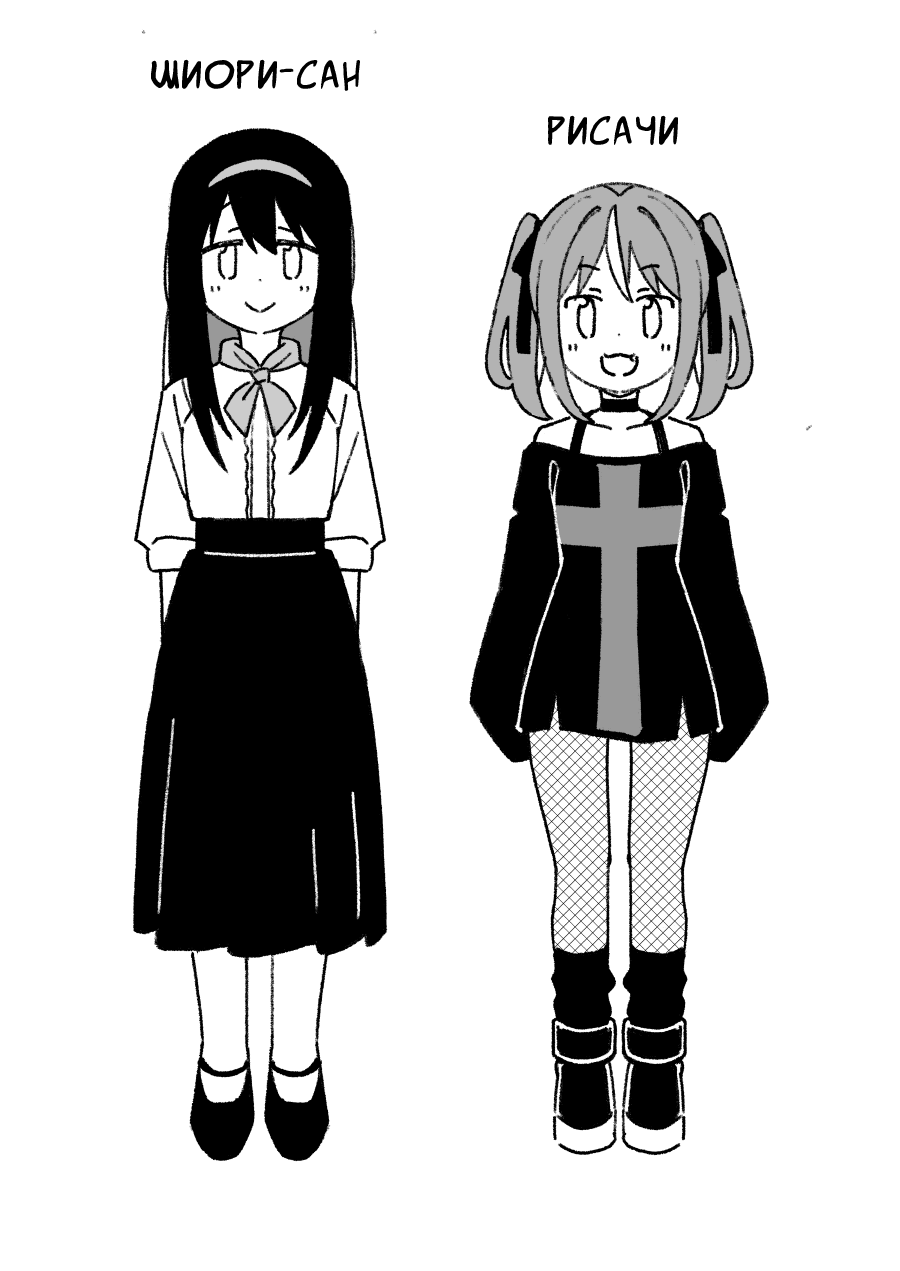
<style>
.page{position:relative;width:900px;height:1271px;background:#ffffff}
.page>*{position:absolute;margin:0}
.t1{font:41.7px "SuperWebcomicBros.Rusbyyakustick";color:#000000}
</style>
<div class="page">
<p class="t1" style="left:151px;top:59px;width:209px;height:32px">Шиори-сан</p>
<p class="t1" style="left:548px;top:115px;width:130px;height:30px">Рисачи</p>
</div>
